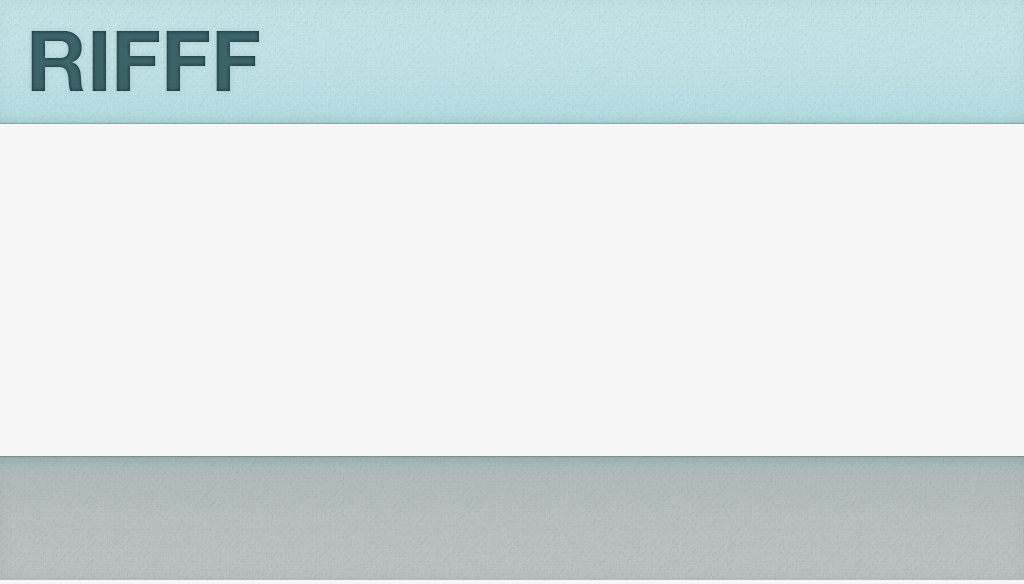
<style>
.page{position:relative;width:1024px;height:584px;background:#f7f7f7}
.page>*{position:absolute;margin:0}
.t1{font:84px "HelveticaNeue-Bold";color:#3a6469}
</style>
<div class="page">
<p class="t1" style="left:31px;top:31px;width:228px;height:60px">RIFFF</p>
</div>
